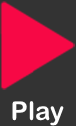
<style>
.page{position:relative;width:76px;height:126px;background:#333333}
.page>*{position:absolute;margin:0}
.t1{font:26px "ArialRoundedMTBold";color:#fefefe}
</style>
<div class="page">
<p class="t1" style="left:12px;top:101px;width:52px;height:25px">Play</p>
</div>
